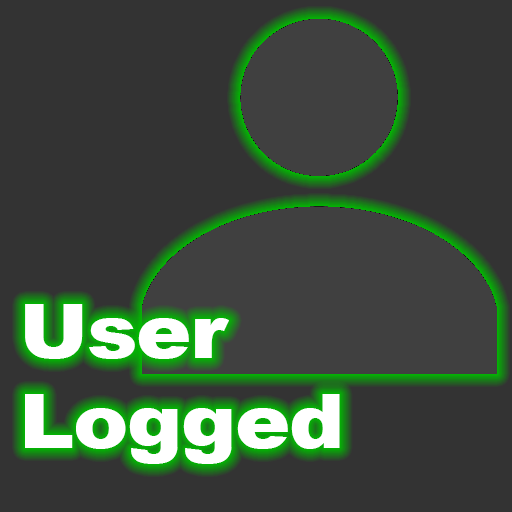
<style>
.page{position:relative;width:512px;height:512px;background:#333333}
.page>*{position:absolute;margin:0}
.t1{font:75px "Arial-Black";letter-spacing:-0.02em;color:#ffffff;scale:1.11 1}
</style>
<div class="page">
<p class="t1" style="left:25px;top:304px;width:315px;height:160px">User<br>Logged</p>
</div>
